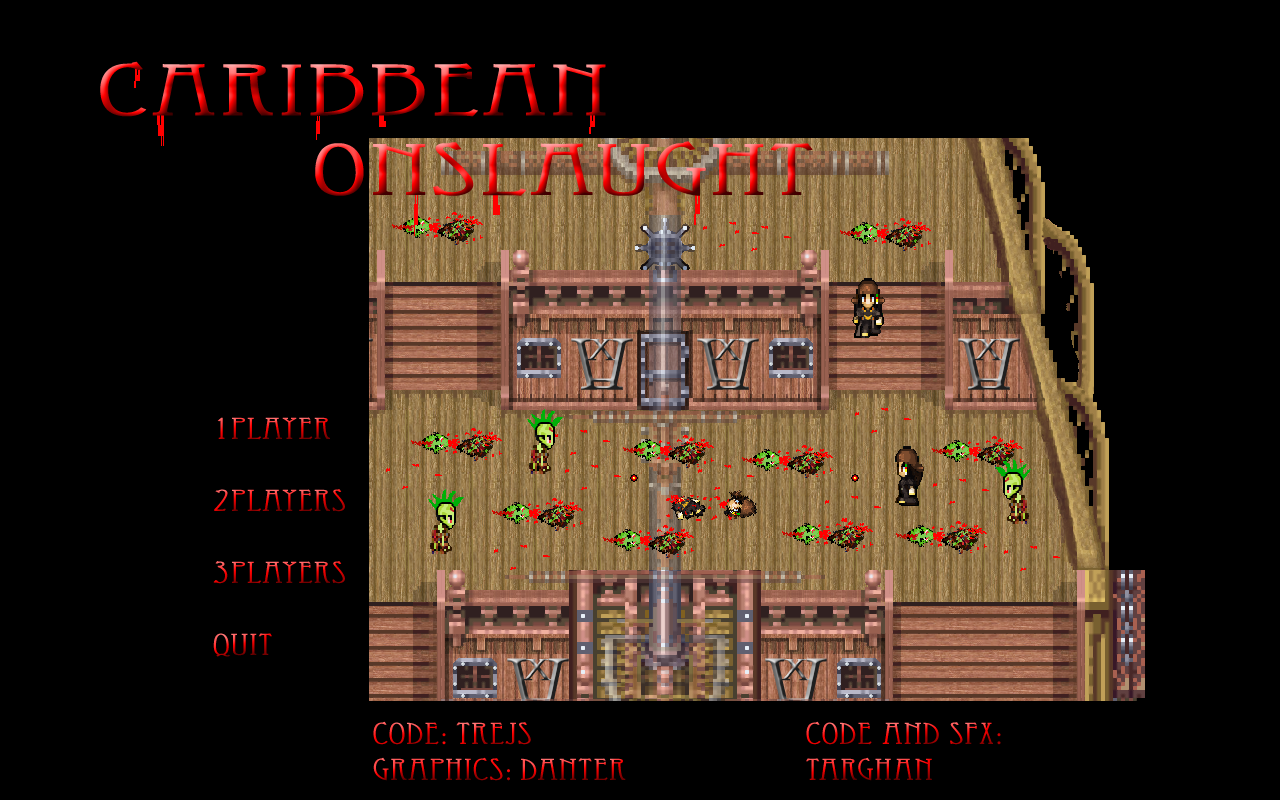
<style>
.page{position:relative;width:1280px;height:800px;background:#000000}
.page>*{position:absolute;margin:0}
.t1{font:72px "EccentricStd";scale:2 1}
.t2{font:30px "EccentricStd";scale:1.5 1}
</style>
<div class="page">
<p class="t1" style="left:100px;top:61px;width:506px;height:56px">Caribbean</p>
<p class="t1" style="left:315px;top:141px;width:498px;height:55px">Onslaught</p>
<p class="t2" style="left:213px;top:417px;width:132px;height:240px">1player<br><br>2Players<br><br>3Players<br><br>Quit</p>
<p class="t2" style="left:373px;top:721px;width:253px;height:60px">Code: Trejs<br>GRaphics: Danter</p>
<p class="t2" style="left:806px;top:721px;width:195px;height:60px">CODE and SFX:<br>Targhan</p>
</div>
